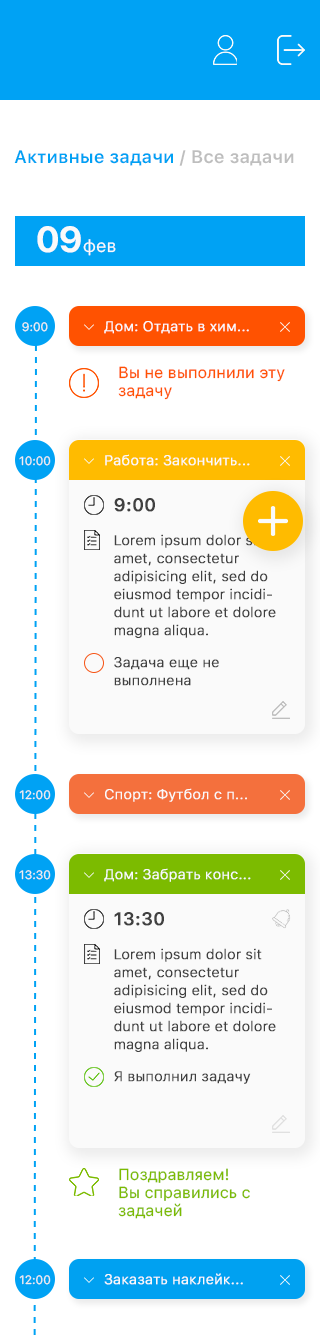
<style>
.page{position:relative;width:320px;height:1339px;background:#ffffff}
.page>*{position:absolute;margin:0}
.t1{font:18px "SFUIText-Semibold";color:#00a2f4}
.t2{font:18px "SFUIText-Semibold";color:#bebebe}
.t3{font:18px "SFUIText-Regular";color:#fafafa}
.t4{font:36px "SFUIDisplay-Bold";color:#fafafa}
.t5{font:12px "SFUIText-Regular";color:#efefef}
.t6{font:14px "SFUIText-Light";color:#fafafa;font-weight:bold}
.t7{font:16px/18px "SFUIText-Regular";color:#ff5201}
.t8{font:18px "SFUIText-Medium";color:#404040;font-weight:bold}
.t9{font:14px/18px "SFUIText-Light";color:#404040;font-weight:bold}
.t10{font:14px "SFUIText-Light";color:#404040;font-weight:bold}
.t11{font:16px/18px "SFUIText-Regular";color:#7cbb00}
</style>
<div class="page">
<p class="t1" style="left:14px;top:150px;width:280px;height:16px">Активные задачи <span class="t2">/ Все задачи</span></p>
<p class="t3" style="left:37px;top:226px;width:79px;height:30px"><span class="t4">09</span>фев</p>
<p class="t5" style="left:22px;top:322px;width:26px;height:10px">9:00</p>
<p class="t6" style="left:104px;top:321px;width:145px;height:13px">Дом: Отдать в хим...</p>
<p class="t7" style="left:118px;top:366px;width:167px;height:34px">Вы не выполнили эту <br>задачу</p>
<p class="t5" style="left:19px;top:456px;width:32px;height:10px">10:00</p>
<p class="t6" style="left:105px;top:454px;width:145px;height:12px">Работа: Закончить...</p>
<p class="t8" style="left:114px;top:498px;width:41px;height:14px">9:00</p>
<p class="t9" style="left:114px;top:534px;width:162px;height:104px">Lorem ipsum dolor sit <br>amet, consectetur <br>adipisicing elit, sed do <br>eiusmod tempor incidi-<br>dunt ut labore et dolore <br>magna aliqua.</p>
<p class="t9" style="left:114px;top:657px;width:105px;height:29px">Задача еще не <br>выполнена</p>
<p class="t5" style="left:19px;top:790px;width:32px;height:10px">12:00</p>
<p class="t6" style="left:105px;top:788px;width:142px;height:14px">Спорт: Футбол с п...</p>
<p class="t5" style="left:19px;top:870px;width:32px;height:10px">13:30</p>
<p class="t6" style="left:104px;top:868px;width:147px;height:14px">Дом: Забрать конс...</p>
<p class="t8" style="left:114px;top:912px;width:50px;height:14px">13:30</p>
<p class="t9" style="left:114px;top:948px;width:162px;height:104px">Lorem ipsum dolor sit <br>amet, consectetur <br>adipisicing elit, sed do <br>eiusmod tempor incidi-<br>dunt ut labore et dolore <br>magna aliqua.</p>
<p class="t10" style="left:114px;top:1071px;width:137px;height:13px">Я выполнил задачу</p>
<p class="t11" style="left:118px;top:1168px;width:132px;height:51px">Поздравляем!<br>Вы справились с <br>задачей</p>
<p class="t5" style="left:19px;top:1275px;width:32px;height:10px">12:00</p>
<p class="t6" style="left:104px;top:1273px;width:139px;height:12px">Заказать наклейк...</p>
</div>
